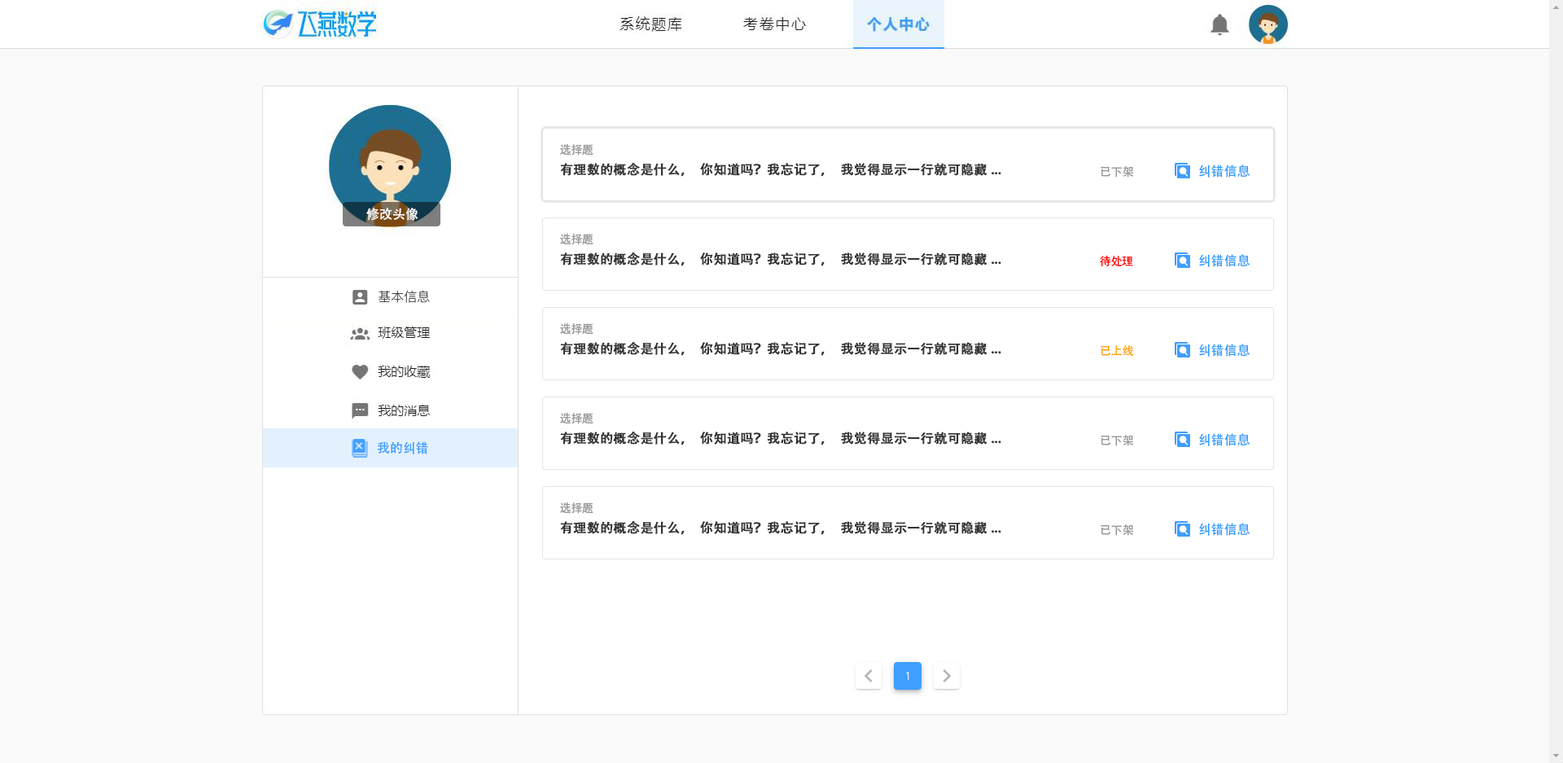
<style>
.page{position:relative;width:1563px;height:763px;background:#ffffff}
.page>*{position:absolute;margin:0}
.t1{font:11.4px "AdobeHeitiStd-Regular";color:#999999}
.t2{font:13px "AdobeHeitiStd-Regular";color:#333333;font-weight:bold}
.t3{font:13px "AdobeHeitiStd-Regular";color:#339dff}
.t4{font:13px "AdobeHeitiStd-Regular";color:#ffffff}
.t5{font:11.4px "AdobeHeitiStd-Regular";color:#ff0000}
.t6{font:11.4px "AdobeHeitiStd-Regular";color:#fea300}
.t7{font:13px "AdobeHeitiStd-Regular";color:#409eff}
</style>
<div class="page">
<p class="t1" style="left:560px;top:143px;width:34px;height:12px">选择题</p>
<p class="t2" style="left:560px;top:162px;width:441px;height:15px">有理数的概念是什么，你知道吗？我忘记了，我觉得显示一行就可隐藏...</p>
<p class="t1" style="left:1101px;top:166px;width:32px;height:11px">已下架</p>
<p class="t3" style="left:1199px;top:164px;width:52px;height:13px">纠错信息</p>
<p class="t4" style="left:366px;top:208px;width:52px;height:13px">修改头像</p>
<p class="t1" style="left:560px;top:233px;width:34px;height:12px">选择题</p>
<p class="t2" style="left:560px;top:252px;width:441px;height:14px">有理数的概念是什么，你知道吗？我忘记了，我觉得显示一行就可隐藏...</p>
<p class="t5" style="left:1100px;top:256px;width:33px;height:11px">待处理</p>
<p class="t3" style="left:1199px;top:254px;width:52px;height:13px">纠错信息</p>
<p class="t1" style="left:560px;top:322px;width:34px;height:13px">选择题</p>
<p class="t2" style="left:560px;top:341px;width:441px;height:15px">有理数的概念是什么，你知道吗？我忘记了，我觉得显示一行就可隐藏...</p>
<p class="t6" style="left:1101px;top:345px;width:33px;height:11px">已上线</p>
<p class="t3" style="left:1199px;top:344px;width:52px;height:13px">纠错信息</p>
<p class="t1" style="left:560px;top:412px;width:34px;height:12px">选择题</p>
<p class="t2" style="left:560px;top:431px;width:441px;height:14px">有理数的概念是什么，你知道吗？我忘记了，我觉得显示一行就可隐藏...</p>
<p class="t1" style="left:1101px;top:435px;width:32px;height:11px">已下架</p>
<p class="t3" style="left:1199px;top:433px;width:52px;height:13px">纠错信息</p>
<p class="t7" style="left:377px;top:441px;width:51px;height:13px">我的纠错</p>
<p class="t1" style="left:560px;top:502px;width:34px;height:12px">选择题</p>
<p class="t2" style="left:560px;top:520px;width:441px;height:15px">有理数的概念是什么，你知道吗？我忘记了，我觉得显示一行就可隐藏...</p>
<p class="t1" style="left:1101px;top:524px;width:32px;height:12px">已下架</p>
<p class="t3" style="left:1199px;top:523px;width:52px;height:13px">纠错信息</p>
</div>
